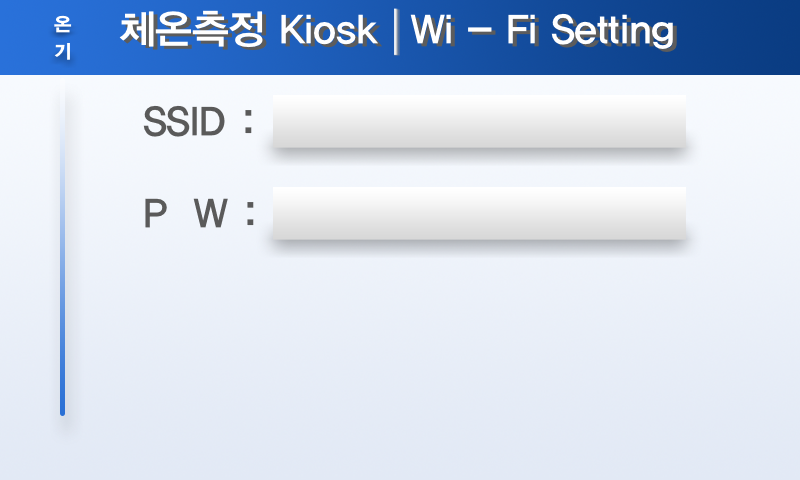
<style>
.page{position:relative;width:800px;height:480px}
.page>*{position:absolute;margin:0}
.t1{font:18.9px/26.5px "YDIYGO360";letter-spacing:-0.006em;color:#ffffff}
.t2{font:40px "YDIYGO340";letter-spacing:-0.006em;color:#ffffff}
.t3{font:40px "YDIYGO340";letter-spacing:-0.006em}
.t4{font:40px "YDIYGO340";letter-spacing:-0.006em;color:#5a5a5a}
</style>
<div class="page">
<p class="t1" style="left:54px;top:15px;width:18px;height:45px">온<br>기</p>
<p class="t2" style="left:119px;top:10px;width:259px;height:38px">체온측정 Kiosk</p>
<p class="t3" style="left:123px;top:13px;width:259px;height:38px">체온측정 Kiosk</p>
<p class="t2" style="left:410px;top:13px;width:263px;height:36px">Wi - Fi Setting</p>
<p class="t4" style="left:143px;top:105px;width:109px;height:32px">SSID :</p>
<p class="t4" style="left:145px;top:198px;width:109px;height:30px">P  W :</p>
</div>
